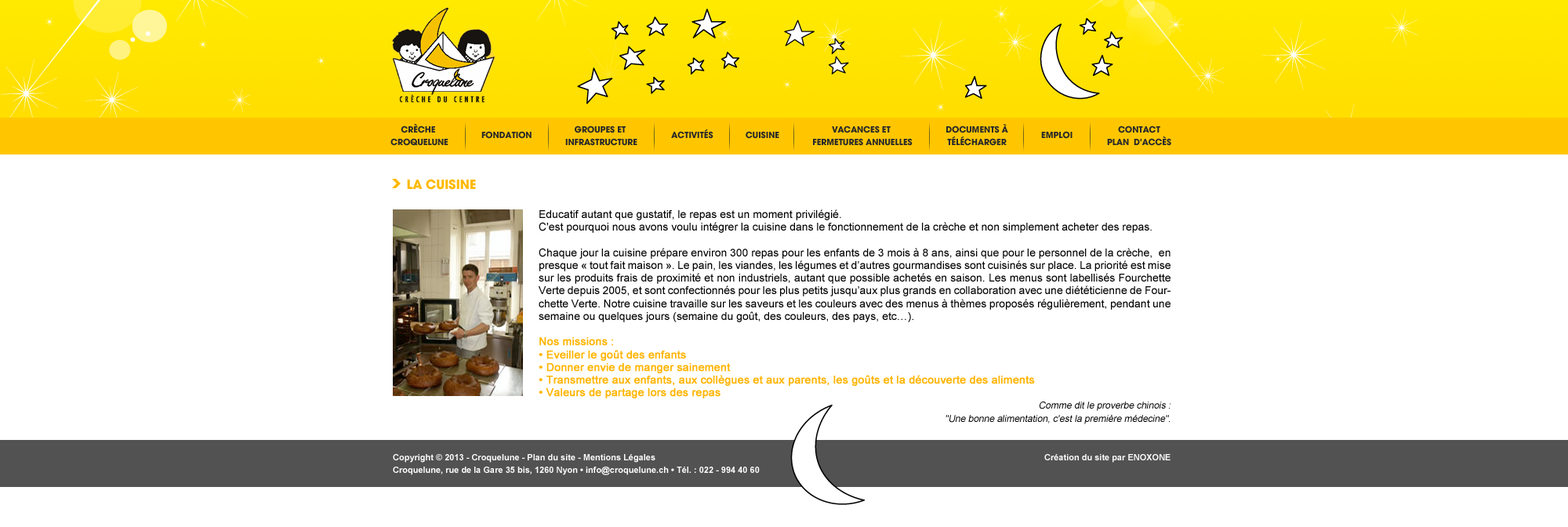
<style>
.page{position:relative;width:1568px;height:527px;background:#ffffff}
.page>*{position:absolute;margin:0}
.t1{font:9.4px/12.7px "AvantGard-Bold";color:#2a2a2a;text-transform:uppercase}
.t2{font:9.4px "AvantGard-Bold";color:#2a2a2a;text-transform:uppercase}
.t3{font:14.1px "AvantGard-Bold";color:#ffb900;text-transform:uppercase}
.t4{font:11px/12.7px "ArialMT";color:#000000}
.t5{font:11px/12.7px "ArialMT";color:#ffb400;font-weight:bold}
.t6{font:9.4px/12.7px "ArialMT";color:#000000;font-style:italic}
.t7{font:8.6px/12.7px "Arial-BoldMT";color:#ffffff}
</style>
<div class="page">
<p class="t1" style="left:390px;top:123px;width:58px;height:23px;text-align:center">Crèche <br>Croquelune</p>
<p class="t1" style="left:565px;top:125px;width:72px;height:21px;text-align:center">Groupes et <br>infrastructure</p>
<p class="t1" style="left:813px;top:125px;width:100px;height:21px;text-align:center">Vacances et <br>fermetures annuelles</p>
<p class="t1" style="left:946px;top:124px;width:62px;height:22px;text-align:center">DOCUMENTs à<br>télécharger</p>
<p class="t1" style="left:1107px;top:125px;width:64px;height:21px;text-align:center">Contact<br>Plan  d'accès</p>
<p class="t2" style="left:481px;top:131px;width:51px;height:8px">Fondation</p>
<p class="t2" style="left:671px;top:129px;width:42px;height:10px">ACTIVITés</p>
<p class="t2" style="left:746px;top:131px;width:33px;height:8px">Cuisine</p>
<p class="t2" style="left:1041px;top:131px;width:32px;height:8px">Emploi</p>
<p class="t3" style="left:407px;top:179px;width:69px;height:11px">LA CUISINE</p>
<p class="t4" style="left:539px;top:209px;width:632px;height:215px;text-align:justify">Educatif autant que gustatif, le repas est un moment privilégié. <br>C'est pourquoi nous avons voulu intégrer la cuisine dans le fonctionnement de la crèche et non simplement acheter des repas.<br><br>Chaque jour la cuisine prépare environ 300 repas pour les enfants de 3 mois à 8 ans, ainsi que pour le personnel de la crèche,  en presque « tout fait maison ». Le pain, les viandes, les légumes et d’autres gourmandises sont cuisinés sur place. La priorité est mise sur les produits frais de proximité et non industriels, autant que possible achetés en saison. Les menus sont labellisés Fourchette Verte depuis 2005, et sont confectionnés pour les plus petits jusqu’aux plus grands en collaboration avec une diététicienne de Fourchette Verte. Notre cuisine travaille sur les saveurs et les couleurs avec des menus à thèmes proposés régulièrement, pendant une semaine ou quelques jours (semaine du goût, des couleurs, des pays, etc…).<br> <br><span class="t5">Nos missions :<br>• Eveiller le goût des enfants<br>• Donner envie de manger sainement<br>• Transmettre aux enfants, aux collègues et aux parents, les goûts et la découverte des aliments<br>• Valeurs de partage lors des repas<br>       </span><span class="t6">   Comme dit le proverbe chinois : <br>"Une bonne alimentation, c'est la première médecine".</span></p>
<p class="t7" style="left:393px;top:454px;width:778px;height:21px">Copyright © 2013 - Croquelune - Plan du site - Mentions Légales                                                             Création du site par ENOXONE<br>Croquelune, rue de la Gare 35 bis, 1260 Nyon • info@croquelune.ch • Tél. : 022 - 994 40 60</p>
</div>
